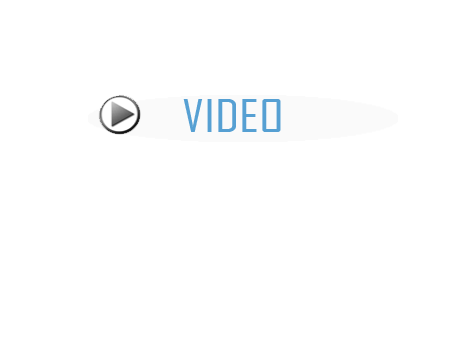
<style>
.page{position:relative;width:454px;height:340px;background:#ffffff}
.page>*{position:absolute;margin:0}
.t1{font:43.4px "AgencyFB-Reg";color:#56a0d3;scale:1.29 1}
</style>
<div class="page">
<p class="t1" style="left:183px;top:99px;width:98px;height:33px">VIDEO</p>
</div>
